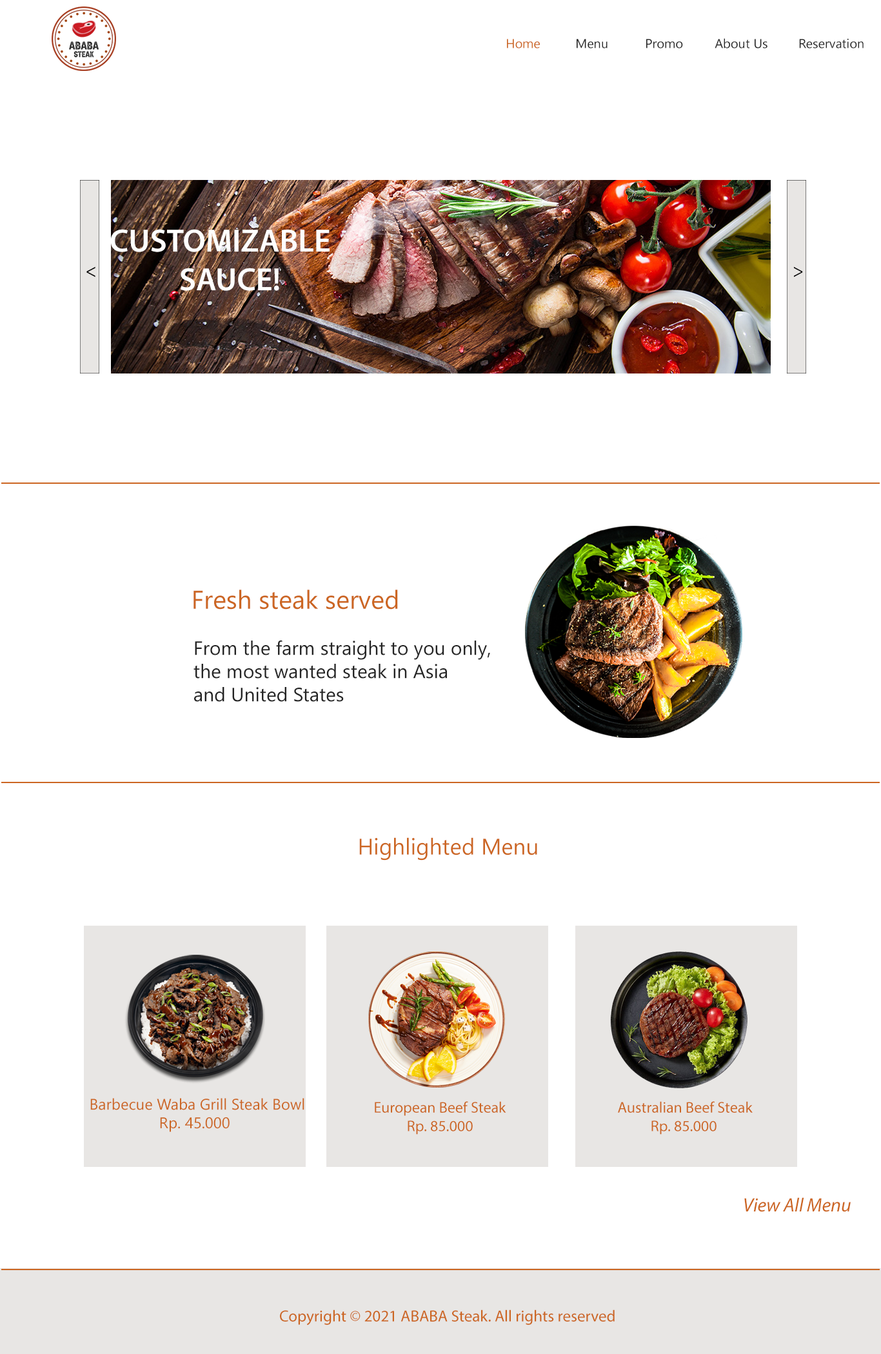
<style>
.page{position:relative;width:881px;height:1354px;background:#ffffff}
.page>*{position:absolute;margin:0}
.t1{font:12.9px "SegoeUI";color:#242424}
.t2{font:12.9px "SegoeUI";color:#cc6622}
.t3{font:19.3px "MyriadPro-It";color:#000000}
.t4{font:25.8px "SegoeUI";color:#cc6622}
.t5{font:19.3px "SegoeUI";color:#242424}
.t6{font:22.6px "SegoeUI";color:#cc6622}
.t7{font:15.5px "SegoeUI";color:#cc6622}
.t8{font:15.5px "MyriadPro-Regular";color:#cc6622}
.t9{font:19.3px "MyriadPro-It";color:#cc6622}
.t10{font:16.1px "MyriadPro-Regular";color:#cc6622}
</style>
<div class="page">
<p class="t1" style="left:507px;top:38px;width:357px;height:10px"><span class="t2">Home </span>  Menu  Promo  About Us      Reservation</p>
<p class="t3" style="left:86px;top:266px;width:9px;height:11px">&lt;</p>
<p class="t3" style="left:793px;top:266px;width:10px;height:11px">&gt;</p>
<p class="t4" style="left:193px;top:589px;width:205px;height:20px">Fresh steak served</p>
<p class="t5" style="left:193px;top:640px;width:297px;height:62px">From the farm straight to you only,<br>the most wanted steak in Asia <br>and United States</p>
<p class="t6" style="left:359px;top:837px;width:178px;height:23px">Highlighted Menu</p>
<p class="t7" style="left:90px;top:1098px;width:214px;height:34px">Barbecue Waba Grill Steak Bowl<br>   Rp. 45.000</p>
<p class="t8" style="left:375px;top:1101px;width:131px;height:33px">European Beef Steak<br>    Rp. 85.000</p>
<p class="t8" style="left:618px;top:1101px;width:135px;height:33px">Australian Beef Steak<br>    Rp. 85.000</p>
<p class="t9" style="left:744px;top:1197px;width:107px;height:15px">View All Menu</p>
<p class="t10" style="left:280px;top:1309px;width:335px;height:16px">Copyright © 2021 ABABA Steak. All rights reserved</p>
</div>
